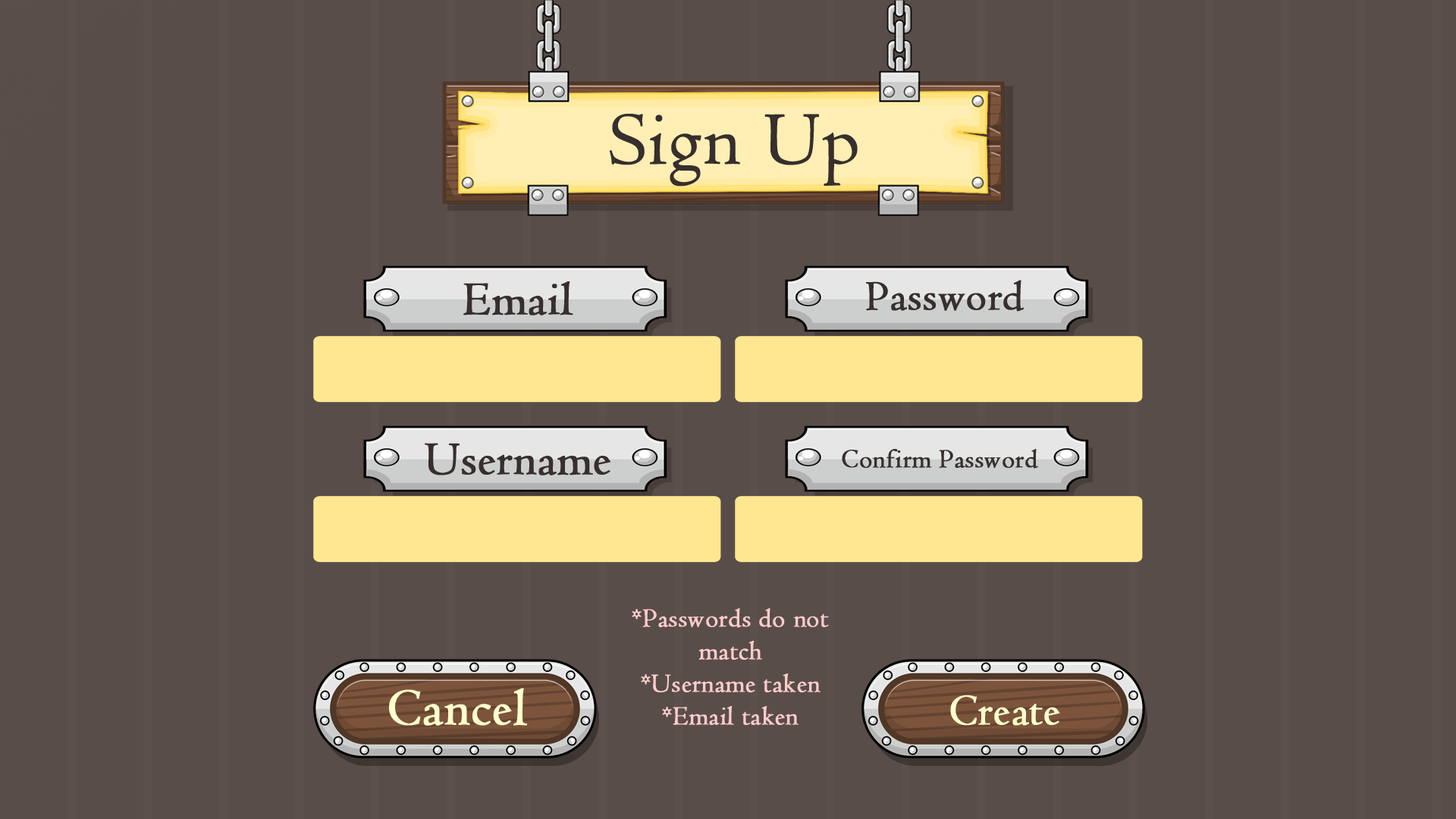
<style>
.page{position:relative;width:1456px;height:819px;background:#594d49}
.page>*{position:absolute;margin:0}
.t1{font:78.2px "Centaur";color:#362f2d;font-weight:bold}
.t2{font:48.5px "Centaur";color:#362f2d;font-weight:bold}
.t3{font:43.5px "Centaur";color:#362f2d;font-weight:bold}
.t4{font:48.6px "Centaur";color:#362f2d;font-weight:bold}
.t5{font:27.2px "Centaur";color:#362f2d;font-weight:bold}
.t6{font:27.2px "Centaur";color:#ffcccc;font-weight:bold}
.t7{font:53.6px "Centaur";color:#ffffcc;font-weight:bold}
.t8{font:44.9px "Centaur";color:#ffffcc;font-weight:bold}
</style>
<div class="page">
<p class="t1" style="left:609px;top:114px;width:249px;height:73px">Sign Up</p>
<p class="t2" style="left:463px;top:281px;width:110px;height:34px">Email</p>
<p class="t3" style="left:866px;top:280px;width:158px;height:32px">Password</p>
<p class="t4" style="left:425px;top:443px;width:185px;height:32px">Username</p>
<p class="t5" style="left:842px;top:449px;width:196px;height:20px">Confirm Password</p>
<p class="t6" style="left:632px;top:608px;width:197px;height:117px;text-align:center">*Passwords do not match<br>*Username taken<br>*Email taken</p>
<p class="t7" style="left:389px;top:688px;width:138px;height:38px">Cancel</p>
<p class="t8" style="left:950px;top:695px;width:110px;height:31px">Create</p>
</div>
